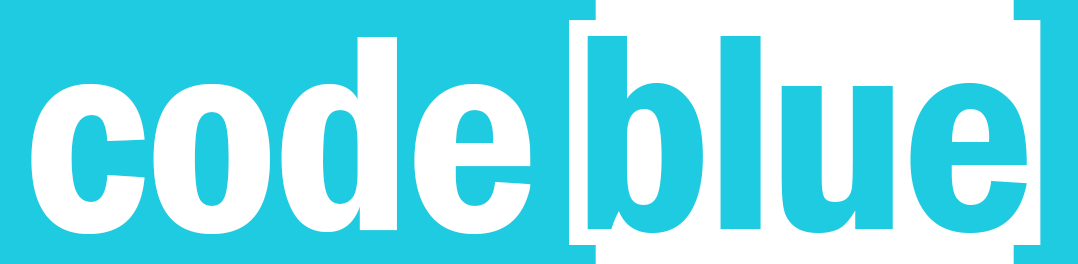
<style>
.page{position:relative;width:1078px;height:264px;background:#1ecbe1}
.page>*{position:absolute;margin:0}
.t1{font:318px "FranklinGothic-DemiCond";color:#1ecbe1}
.t2{font:290.3px "FranklinGothic-DemiCond";letter-spacing:-0.02em;color:#ffffff}
.t3{font:290.3px "FranklinGothic-DemiCond";letter-spacing:-0.02em;color:#1ecbe1}
</style>
<div class="page">
<p class="t1" style="left:530px;top:0px;width:66px;height:265px">[</p>
<p class="t1" style="left:1013px;top:0px;width:67px;height:265px">]</p>
<p class="t2" style="left:31px;top:37px;width:500px;height:197px">code</p>
<p class="t3" style="left:587px;top:36px;width:440px;height:197px">blue</p>
</div>
